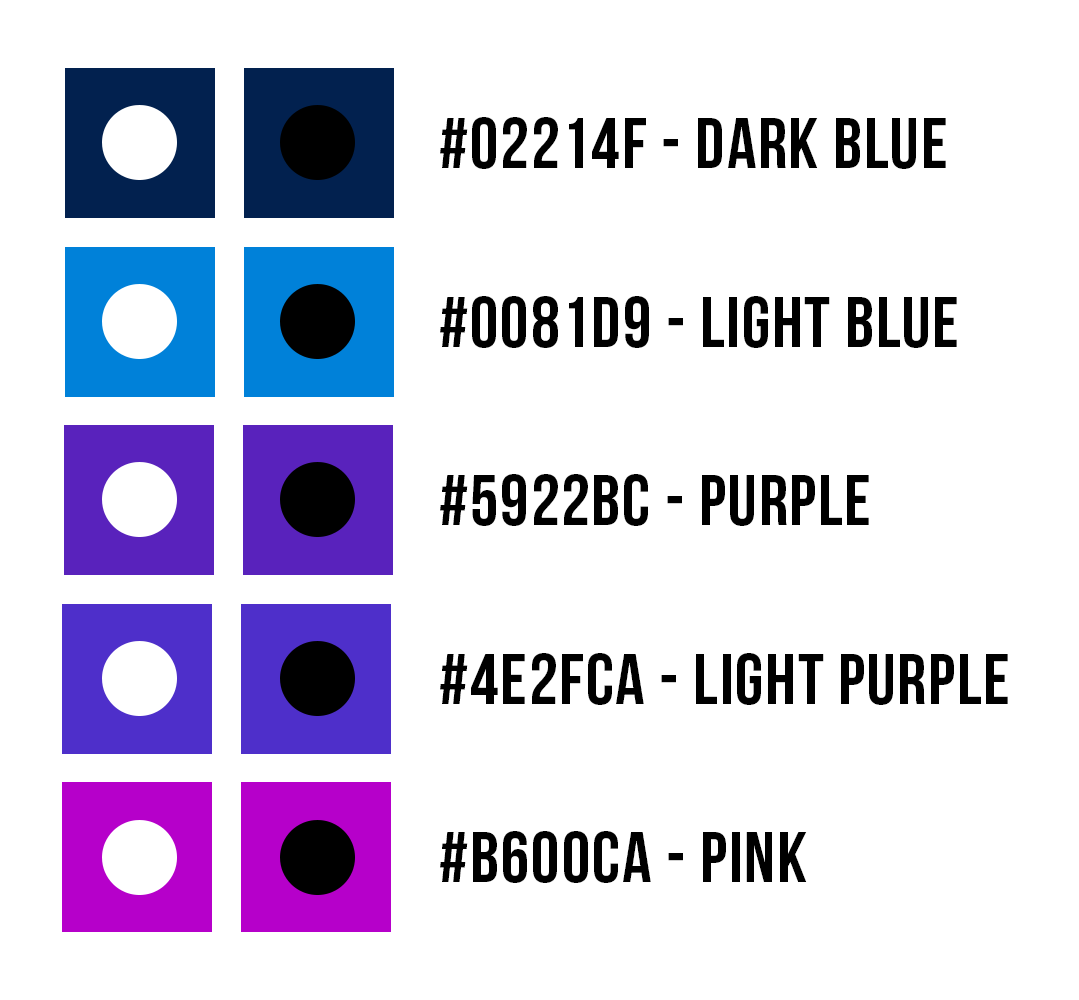
<style>
.page{position:relative;width:1079px;height:1000px;background:#ffffff}
.page>*{position:absolute;margin:0}
.t1{font:72px "BebasNeue";letter-spacing:0.025em;color:#000000}
</style>
<div class="page">
<p class="t1" style="left:440px;top:117px;width:506px;height:52px">#02214F - Dark Blue</p>
<p class="t1" style="left:440px;top:296px;width:517px;height:52px">#0081D9 - LIGHT Blue</p>
<p class="t1" style="left:440px;top:474px;width:429px;height:52px">#5922BC - PURPLE</p>
<p class="t1" style="left:440px;top:653px;width:568px;height:52px">#4E2FCA - LIGHT PURPLE</p>
<p class="t1" style="left:440px;top:831px;width:367px;height:52px">#B600CA - PINK</p>
</div>
